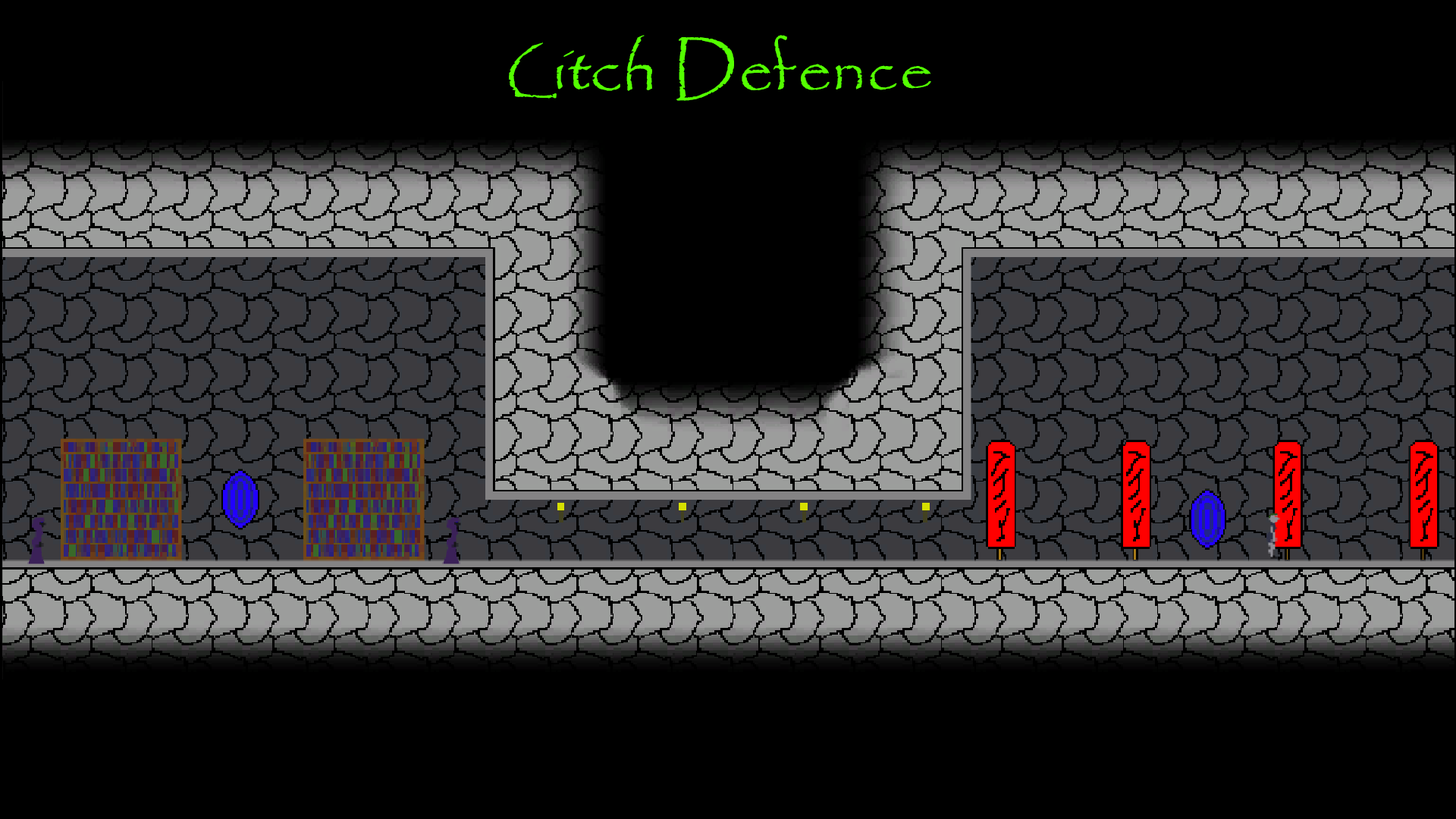
<style>
.page{position:relative;width:1456px;height:819px;background:#000000}
.page>*{position:absolute;margin:0}
.t1{font:54.6px "Papyrus-Regular";color:#54ff00}
</style>
<div class="page">
<p class="t1" style="left:509px;top:35px;width:422px;height:66px">Litch Defence</p>
</div>
